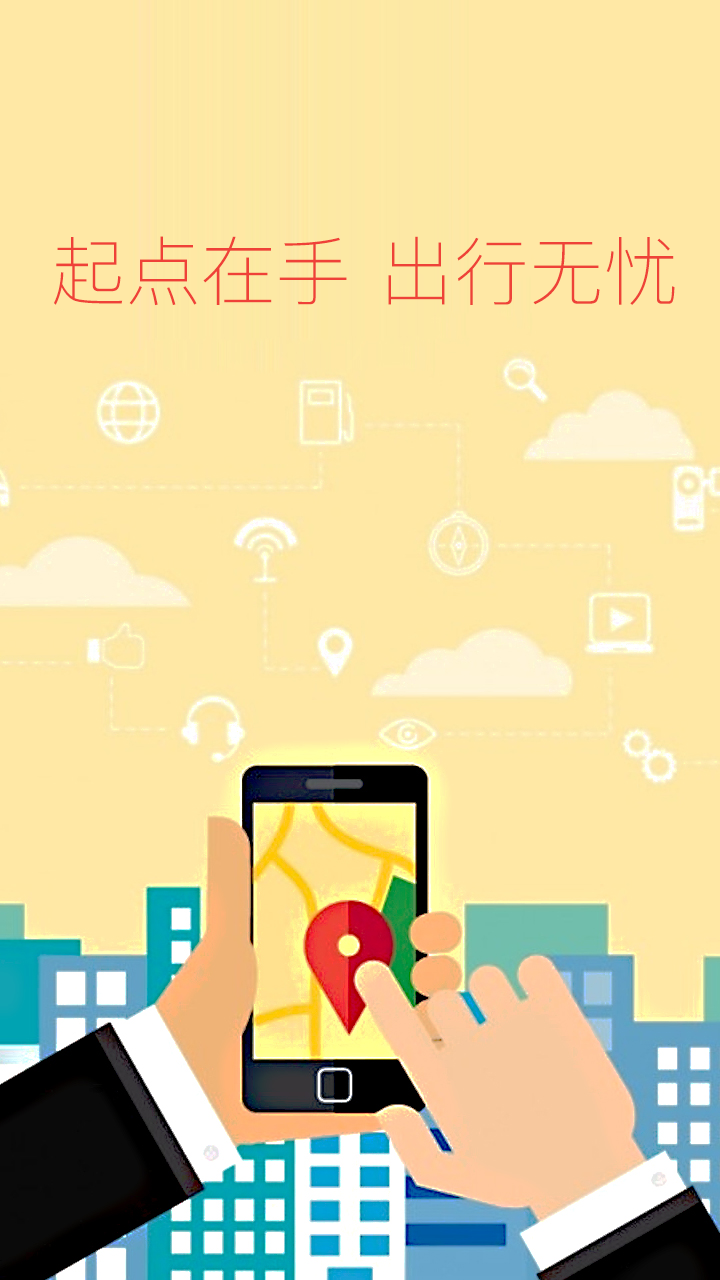
<style>
.page{position:relative;width:720px;height:1280px;background:#ffe8a5}
.page>*{position:absolute;margin:0}
.t1{font:75px "PingFangSC-Thin";color:#ef4138}
.t2{font:75px "PingFangSC-Thin";color:#ee4238}
</style>
<div class="page">
<p class="t1" style="left:54px;top:236px;width:293px;height:70px">起点在手</p>
<p class="t2" style="left:388px;top:236px;width:287px;height:69px">出行无忧</p>
</div>
